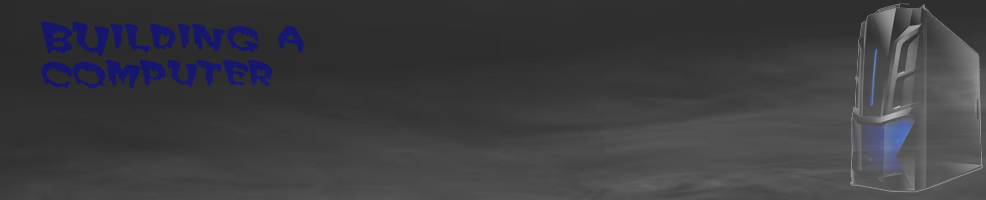
<style>
.page{position:relative;width:986px;height:200px}
.page>*{position:absolute;margin:0}
.t1{font:36px "MATTEROFFACT";letter-spacing:0.041em;color:#16166c;font-weight:bold;scale:1.17 1}
</style>
<div class="page">
<p class="t1" style="left:41px;top:22px;width:263px;height:67px">BUilding a <br>computer</p>
</div>
